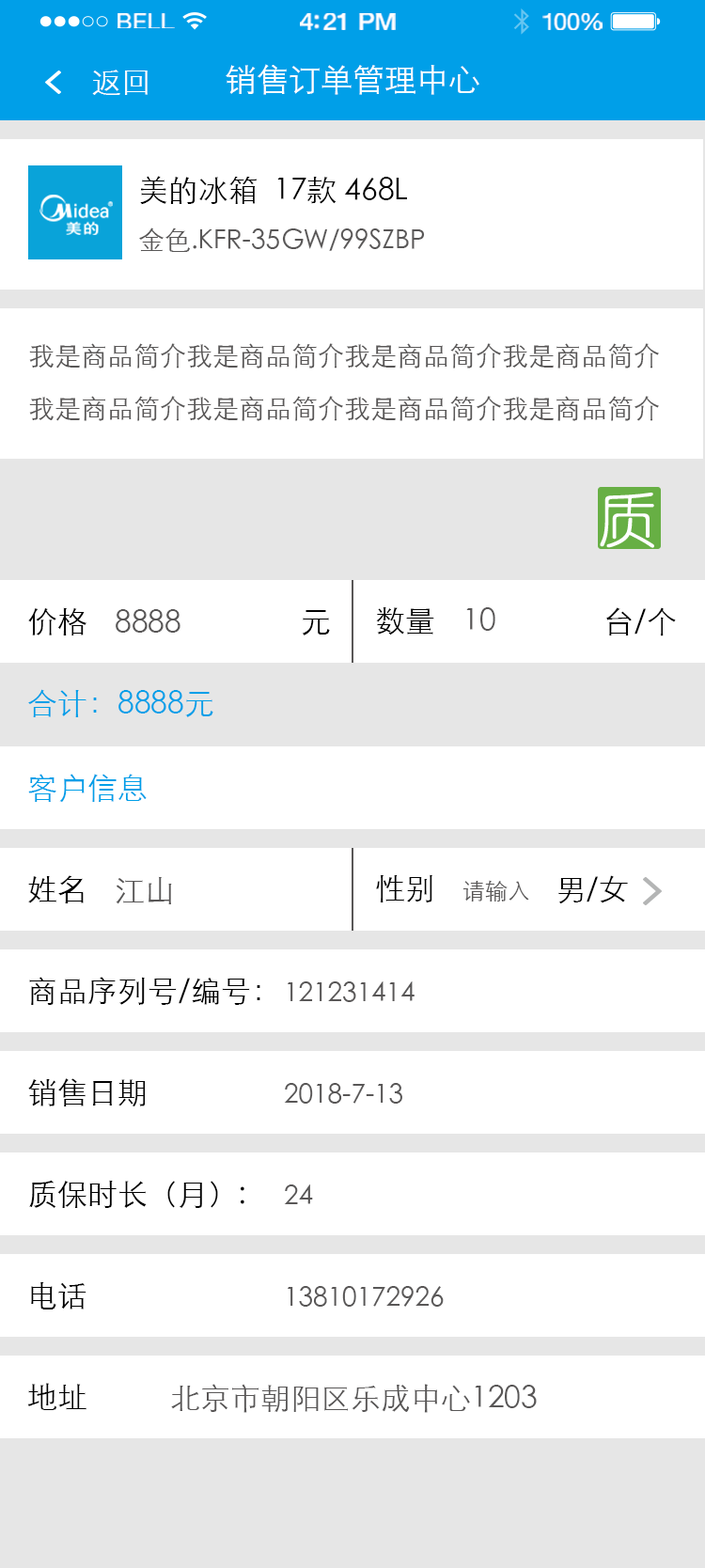
<style>
.page{position:relative;width:705px;height:1568px;background:#ffffff}
.page>*{position:absolute;margin:0}
.t1{font:21.9px "HelveticaNeue";letter-spacing:0.02em;color:#ffffff;scale:1.06 1}
.t2{font:23.8px "HelveticaNeue-Medium";letter-spacing:-0.02em;color:#ffffff;scale:1.06 1}
.t3{font:22.8px "HelveticaNeue";letter-spacing:-0.02em;color:#ffffff;scale:1.06 1}
.t4{font:32px "STXihei";color:#ffffff}
.t5{font:30.1px "STXihei";color:#ffffff}
.t6{font:26.3px/52.6px "STXihei";color:#595757}
.t7{font:30.1px/52.6px "STXihei";color:#000000}
.t8{font:30.1px "STXihei";color:#000000}
.t9{font:30.1px "STXihei";color:#595757}
.t10{font:30.1px "STXihei";color:#009fe8}
.t11{font:22.6px "STXihei";color:#595757}
.t12{font:26.3px "STXihei";color:#595757}
</style>
<div class="page">
<p class="t1" style="left:118px;top:13px;width:57px;height:15px">BELL</p>
<p class="t2" style="left:300px;top:13px;width:96px;height:17px">4:21 PM</p>
<p class="t3" style="left:542px;top:13px;width:61px;height:17px">100%</p>
<p class="t4" style="left:226px;top:64px;width:253px;height:31px">销售订单管理中心</p>
<p class="t5" style="left:92px;top:70px;width:56px;height:25px">返回</p>
<p class="t6" style="left:139px;top:176px;width:286px;height:76px"><span class="t7">美的冰箱  17款 468L    <br></span>金色.KFR-35GW/99SZBP</p>
<p class="t6" style="left:29px;top:343px;width:630px;height:78px">我是商品简介我是商品简介我是商品简介我是商品简介我是商品简介我是商品简介我是商品简介我是商品简介</p>
<p class="t8" style="left:28px;top:607px;width:58px;height:28px">价格</p>
<p class="t9" style="left:116px;top:609px;width:64px;height:24px">8888</p>
<p class="t8" style="left:302px;top:610px;width:28px;height:25px">元</p>
<p class="t8" style="left:376px;top:607px;width:58px;height:28px">数量</p>
<p class="t9" style="left:466px;top:607px;width:29px;height:24px">10</p>
<p class="t8" style="left:606px;top:607px;width:70px;height:29px">台/个</p>
<p class="t10" style="left:28px;top:689px;width:185px;height:28px">合计：8888元</p>
<p class="t10" style="left:28px;top:774px;width:119px;height:29px">客户信息</p>
<p class="t8" style="left:28px;top:875px;width:56px;height:28px">姓名</p>
<p class="t9" style="left:116px;top:876px;width:56px;height:28px">江山</p>
<p class="t8" style="left:376px;top:874px;width:56px;height:28px">性别</p>
<p class="t11" style="left:463px;top:880px;width:66px;height:22px">请输入</p>
<p class="t8" style="left:558px;top:875px;width:70px;height:29px">男/女</p>
<p class="t8" style="left:29px;top:977px;width:231px;height:28px">商品序列号/编号：</p>
<p class="t12" style="left:288px;top:981px;width:127px;height:21px">121231414</p>
<p class="t8" style="left:28px;top:1078px;width:118px;height:28px">销售日期</p>
<p class="t12" style="left:284px;top:1083px;width:118px;height:21px">2018-7-13</p>
<p class="t8" style="left:29px;top:1180px;width:215px;height:28px">质保时长（月）:</p>
<p class="t12" style="left:284px;top:1184px;width:29px;height:20px">24</p>
<p class="t8" style="left:31px;top:1281px;width:55px;height:28px">电话</p>
<p class="t12" style="left:288px;top:1286px;width:156px;height:21px">13810172926</p>
<p class="t8" style="left:27px;top:1383px;width:59px;height:27px">地址</p>
<p class="t9" style="left:171px;top:1384px;width:366px;height:29px">北京市朝阳区乐成中心1203</p>
</div>
